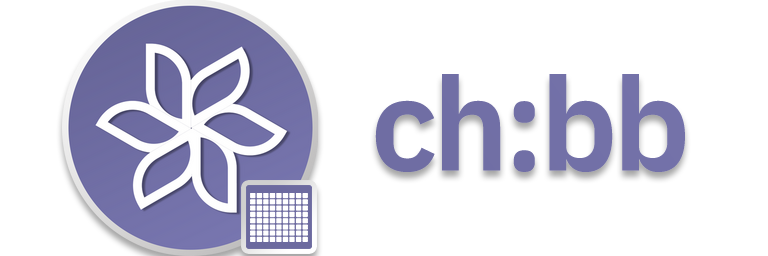
<style>
.page{position:relative;width:768px;height:256px;background:#ffffff}
.page>*{position:absolute;margin:0}
.t1{font:130px "IBMPlexSans-SemiBold";letter-spacing:-0.04em;color:#7270a7}
</style>
<div class="page">
<p class="t1" style="left:375px;top:74px;width:310px;height:98px">ch:bb</p>
</div>
